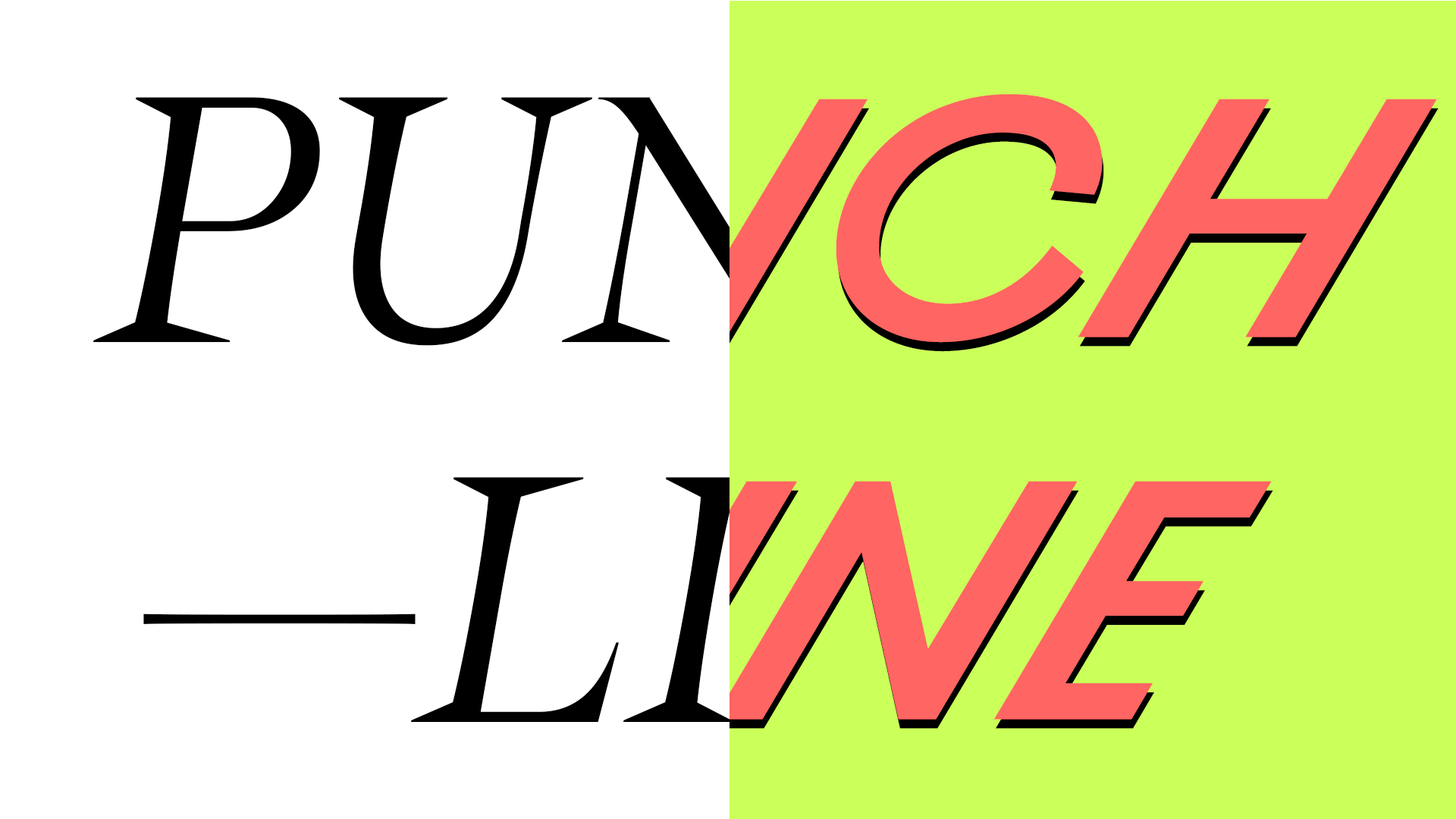
<style>
.page{position:relative;width:1456px;height:819px;background:#ffffff}
.page>*{position:absolute;margin:0}
.t1{font:339.7px "Traulha-Italica";color:#000000}
.t2{font:370.8px "Traulha-Italica";color:#000000}
</style>
<div class="page">
<p class="t1" style="left:93px;top:97px;width:768px;height:252px">PUN</p>
<p class="t1" style="left:143px;top:477px;width:632px;height:245px">—LI<span class="t2">NE</span></p>
</div>
